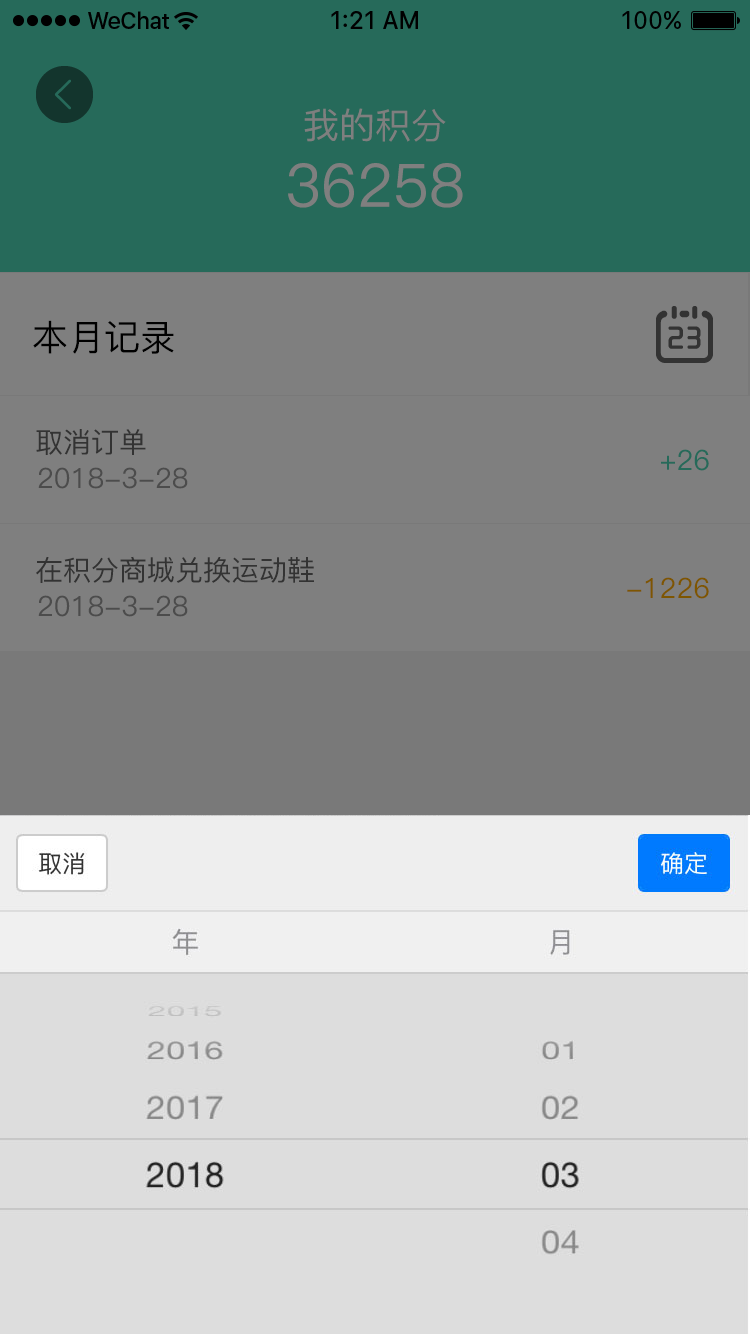
<style>
.page{position:relative;width:750px;height:1334px;background:#7f7f7f}
.page>*{position:absolute;margin:0}
.t1{font:60px/48px "PingFang-SC-Medium";color:#7f7f7f}
.t2{font:36px/48px "PingFang-SC-Medium";color:#7f7f7f}
.t3{font:36px "PingFang-SC-Medium";color:#000000}
.t4{font:28px "PingFang-SC-Medium";color:#333333}
.t5{font:28px "PingFang-SC-Medium";color:#266a5a}
.t6{font:28px "PingFang-SC-Medium";color:#4c4c4c}
.t7{font:28px "PingFang-SC-Medium";color:#7e5601}
</style>
<div class="page">
<p class="t1" style="left:288px;top:108px;width:175px;height:100px;text-align:center"><span class="t2">我的积分<br></span>36258</p>
<p class="t3" style="left:33px;top:320px;width:141px;height:34px">本月记录</p>
<p class="t4" style="left:36px;top:429px;width:110px;height:26px">取消订单</p>
<p class="t5" style="left:661px;top:449px;width:48px;height:22px">+26</p>
<p class="t6" style="left:38px;top:467px;width:150px;height:22px">2018-3-28</p>
<p class="t4" style="left:36px;top:556px;width:278px;height:27px">在积分商城兑换运动鞋</p>
<p class="t7" style="left:627px;top:577px;width:82px;height:22px">-1226</p>
<p class="t6" style="left:38px;top:595px;width:150px;height:22px">2018-3-28</p>
</div>
